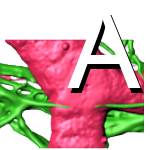
<style>
.page{position:relative;width:150px;height:150px;background:#ffffff}
.page>*{position:absolute;margin:0}
.t1{font:108px "ArialMT";color:#ffffff}
</style>
<div class="page">
<p class="t1" style="left:67px;top:10px;width:74px;height:78px">A</p>
</div>
